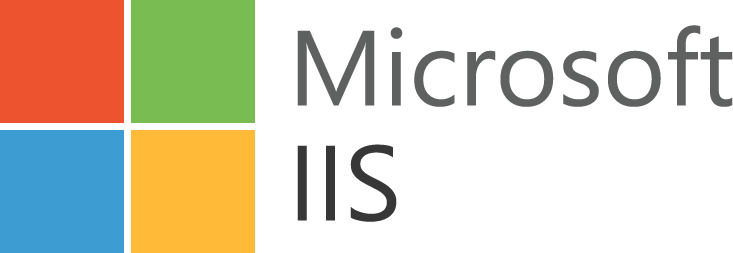
<style>
.page{position:relative;width:733px;height:253px;background:#ffffff}
.page>*{position:absolute;margin:0}
.t1{font:106.4px "SegoeUI";color:#5f6160}
.t2{font:106.4px "SegoeUI";color:#373737}
</style>
<div class="page">
<p class="t1" style="left:297px;top:25px;width:436px;height:82px">Microsoft</p>
<p class="t2" style="left:297px;top:144px;width:100px;height:78px">IIS</p>
</div>
